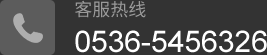
<style>
.page{position:relative;width:267px;height:55px;background:#333333}
.page>*{position:absolute;margin:0}
.t1{font:18px "NotoSansHans-Regular";color:#9a9a9a}
.t2{font:30px "ArialMT";color:#ffffff}
</style>
<div class="page">
<p class="t1" style="left:75px;top:0px;width:71px;height:18px">客服热线</p>
<p class="t2" style="left:75px;top:30px;width:192px;height:23px">0536-5456326</p>
</div>
